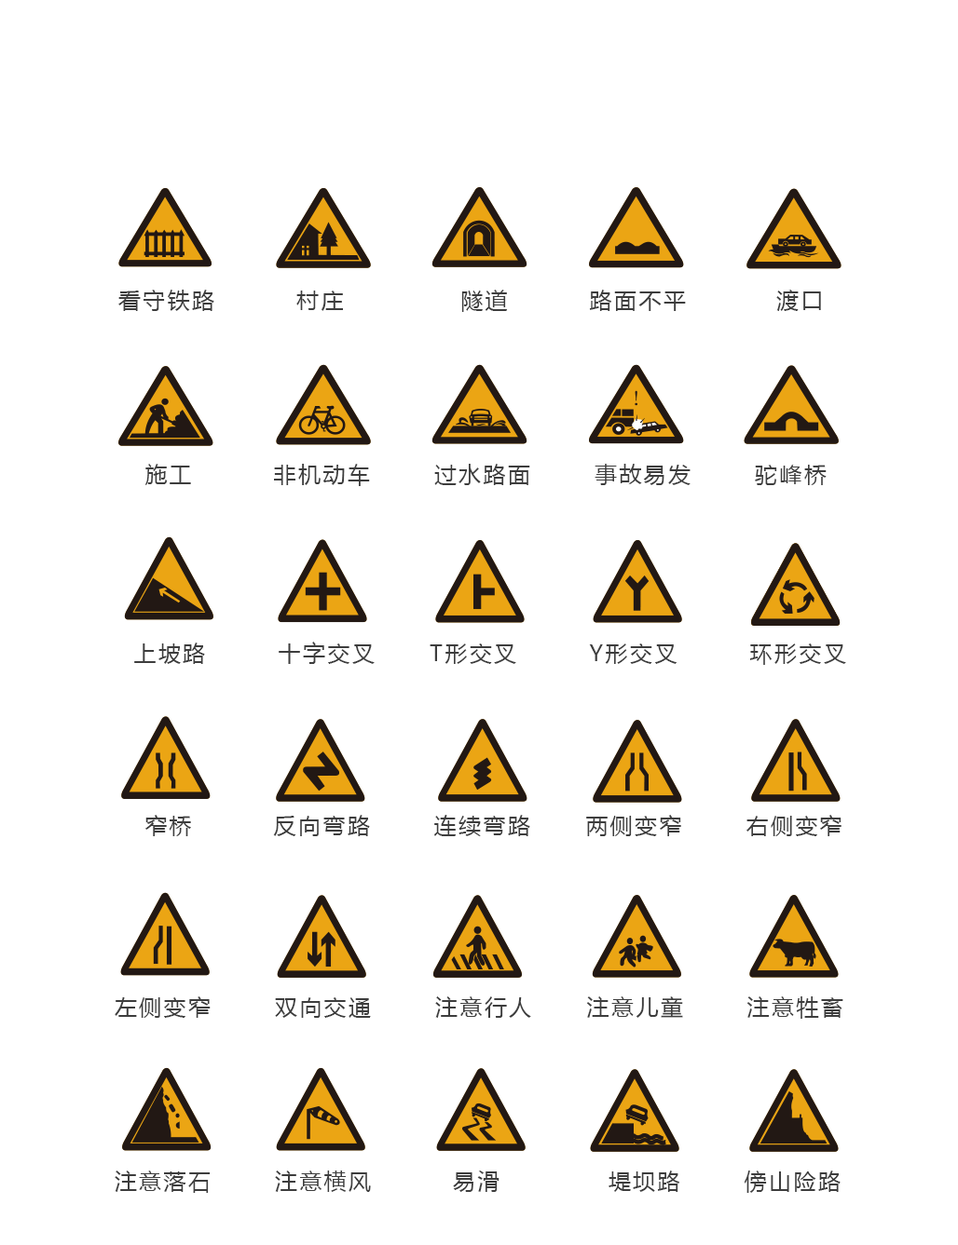
<style>
.page{position:relative;width:958px;height:1245px;background:#ffffff}
.page>*{position:absolute;margin:0}
.t1{font:22.4px "MicrosoftYaHei";letter-spacing:0.1em;color:#3d3d3d}
</style>
<div class="page">
<p class="t1" style="left:118px;top:290px;width:703px;height:22px">看守铁路         村庄             隧道         路面不平          渡口</p>
<p class="t1" style="left:144px;top:464px;width:682px;height:22px">施工         非机动车       过水路面       事故易发       驼峰桥</p>
<p class="t1" style="left:134px;top:642px;width:712px;height:23px">上坡路        十字交叉      T形交叉        Y形交叉        环形交叉</p>
<p class="t1" style="left:145px;top:815px;width:696px;height:21px">窄桥         反向弯路       连续弯路      两侧变窄       右侧变窄</p>
<p class="t1" style="left:115px;top:997px;width:728px;height:22px">左侧变窄       双向交通       注意行人      注意儿童       注意牲畜</p>
<p class="t1" style="left:115px;top:1171px;width:725px;height:22px">注意落石       注意横风         易滑            堤坝路       傍山险路</p>
</div>
